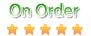
<style>
.page{position:relative;width:91px;height:36px;background:#ffffff}
.page>*{position:absolute;margin:0}
.t1{font:18px "MyriadPro-Regular"}
</style>
<div class="page">
<p class="t1" style="left:9px;top:3px;width:70px;height:14px">On Order</p>
</div>
